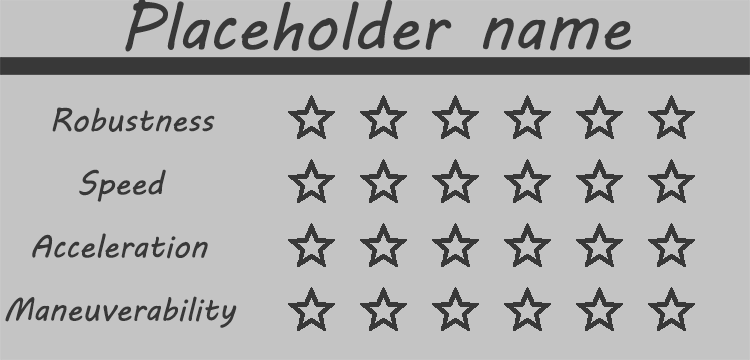
<style>
.page{position:relative;width:750px;height:360px;background:#c4c4c4}
.page>*{position:absolute;margin:0}
.t1{font:64px "MVBoli";color:#383838}
.t2{font:32px "MVBoli";color:#383838}
</style>
<div class="page">
<p class="t1" style="left:125px;top:0px;width:506px;height:52px">Placeholder name</p>
<p class="t2" style="left:52px;top:107px;width:163px;height:25px">Robustness</p>
<p class="t2" style="left:79px;top:169px;width:87px;height:33px">Speed</p>
<p class="t2" style="left:32px;top:233px;width:176px;height:26px">Acceleration</p>
<p class="t2" style="left:5px;top:296px;width:232px;height:32px">Maneuverability</p>
</div>
